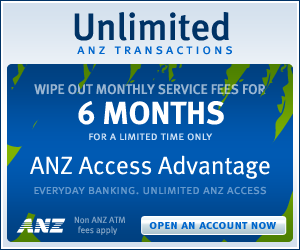
<style>
.page{position:relative;width:300px;height:250px}
.page>*{position:absolute;margin:0}
.t1{font:38px "MetaMediumLF-Roman";color:#003366}
.t2{font:14px "MetaNormalLF-Caps";letter-spacing:0.21em;color:#0066cc}
.t3{font:14px "MetaMediumLF-Roman";color:#99b5d1}
.t4{font:32px "MetaBoldLF-Roman";color:#ffffff}
.t5{font:12px "MetaNormalLF-Caps";color:#cce0f5}
.t6{font:25px "MetaNormalLF-Roman";color:#ffffff}
.t7{font:13px "MetaNormalLF-Caps";color:#6699cc}
.t8{font:9px/10px "MetaNormalLF-Roman";color:#80a2c5}
.t9{font:13px "MetaBold-Caps";letter-spacing:0.01em;color:#0066cc}
</style>
<div class="page">
<p class="t1" style="left:74px;top:12px;width:155px;height:29px">Unlimited</p>
<p class="t2" style="left:77px;top:46px;width:155px;height:9px">anz transactions</p>
<p class="t3" style="left:34px;top:84px;width:232px;height:11px">WIPE OUT MONTHLY SERVICE FEES FOR</p>
<p class="t4" style="left:78px;top:101px;width:146px;height:24px">6 MONTHS</p>
<p class="t5" style="left:89px;top:133px;width:124px;height:8px">for a limited time only</p>
<p class="t6" style="left:30px;top:155px;width:240px;height:24px">ANZ Access Advantage</p>
<p class="t7" style="left:34px;top:186px;width:233px;height:9px">everyday banking. unlimited anz access</p>
<p class="t8" style="left:74px;top:216px;width:51px;height:19px">Non ANZ ATM <br> fees apply</p>
<p class="t9" style="left:149px;top:222px;width:127px;height:7px">open an account now</p>
</div>
